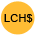
<style>
.page{position:relative;width:35px;height:35px;background:#ffbc34}
.page>*{position:absolute;margin:0}
.t1{font:11.2px "ArialMT";color:#000000}
</style>
<div class="page">
<p class="t1" style="left:4px;top:14px;width:29px;height:9px">LCH$</p>
</div>
